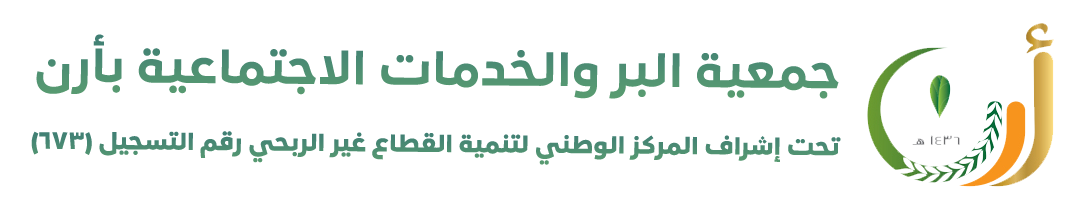
<style>
.page{position:relative;width:1070px;height:216px;background:#ffffff}
.page>*{position:absolute;margin:0}
.t1{font:45.8px "LoewNextArabic-ExtraBold";color:#519372}
.t2{font:23.3px "LoewNextArabic-Heavy";color:#4c8c73}
</style>
<div class="page">
<p class="t1" style="left:36px;top:34px;width:803px;height:65px">جمعية البر والخدمات الاجتماعية بأرن</p>
<p class="t2" style="left:31px;top:131px;width:810px;height:34px">تحت إشراف المركز الوطني لتنمية القطاع غير الربحي رقم التسجيل (673)</p>
</div>
